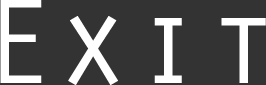
<style>
.page{position:relative;width:266px;height:85px;background:#333333}
.page>*{position:absolute;margin:0}
.t1{font:125px "OratorStd";color:#ffffff}
</style>
<div class="page">
<p class="t1" style="left:0px;top:0px;width:266px;height:85px">Exit</p>
</div>
